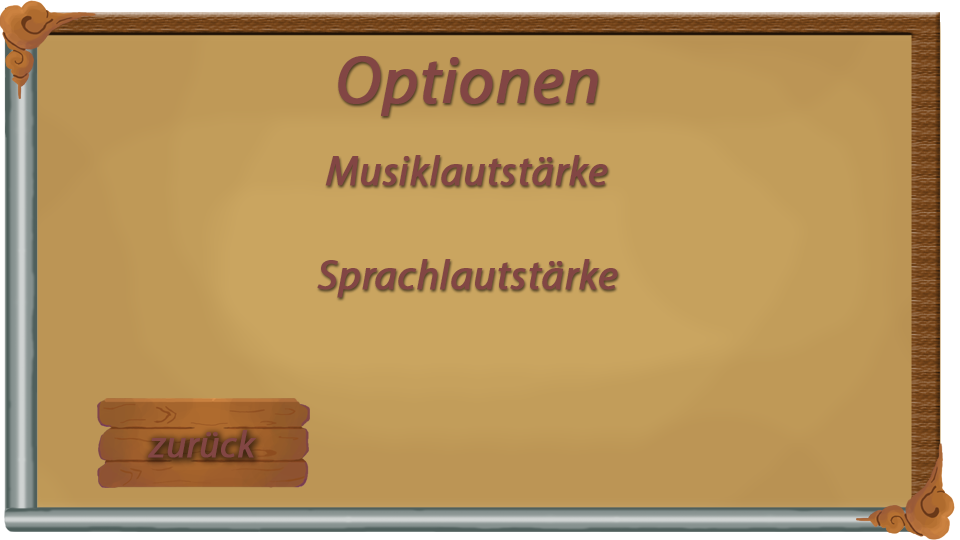
<style>
.page{position:relative;width:960px;height:540px}
.page>*{position:absolute;margin:0}
.t1{font:66.7px "MyriadPro-It";color:#824644;font-weight:bold}
.t2{font:41.7px "MyriadPro-It";color:#824644;font-weight:bold}
.t3{font:37.6px "MyriadPro-It";color:#824644;font-weight:bold}
</style>
<div class="page">
<p class="t1" style="left:338px;top:56px;width:260px;height:60px">Optionen</p>
<p class="t2" style="left:325px;top:155px;width:283px;height:31px">Musiklautstärke</p>
<p class="t2" style="left:317px;top:259px;width:301px;height:39px">Sprachlautstärke</p>
<p class="t3" style="left:148px;top:430px;width:108px;height:28px">zurück</p>
</div>
